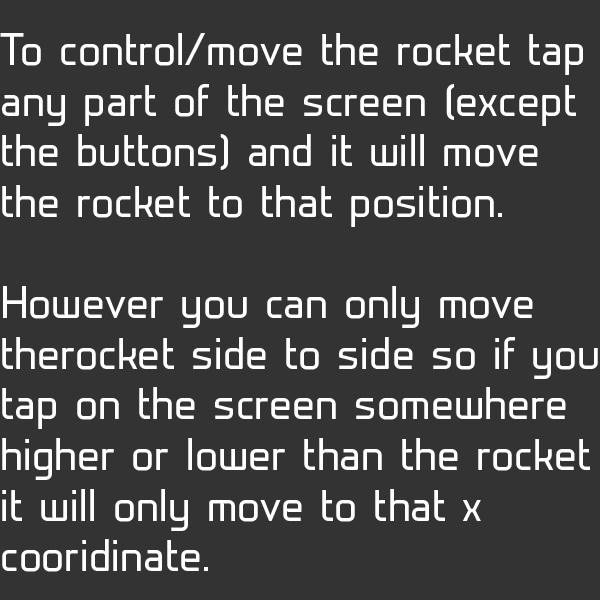
<style>
.page{position:relative;width:600px;height:600px;background:#333333}
.page>*{position:absolute;margin:0}
.t1{font:42.2px "Prime-Regular";color:#ffffff}
</style>
<div class="page">
<p class="t1" style="left:0px;top:33px;width:598px;height:539px">To control/move the rocket tap<br>any part of the screen (except<br>the buttons) and it will move<br>the rocket to that position.<br><br>However you can only move <br>therocket side to side so if you <br>tap on the screen somewhere<br>higher or lower than the rocket<br>it will only move to that x<br>cooridinate.</p>
</div>
